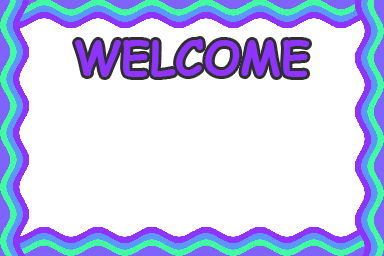
<style>
.page{position:relative;width:384px;height:256px;background:#ffffff}
.page>*{position:absolute;margin:0}
.t1{font:45.8px "ComicSansMS-Bold";color:#8f33ff}
</style>
<div class="page">
<p class="t1" style="left:75px;top:39px;width:234px;height:38px">WELCOME</p>
</div>
